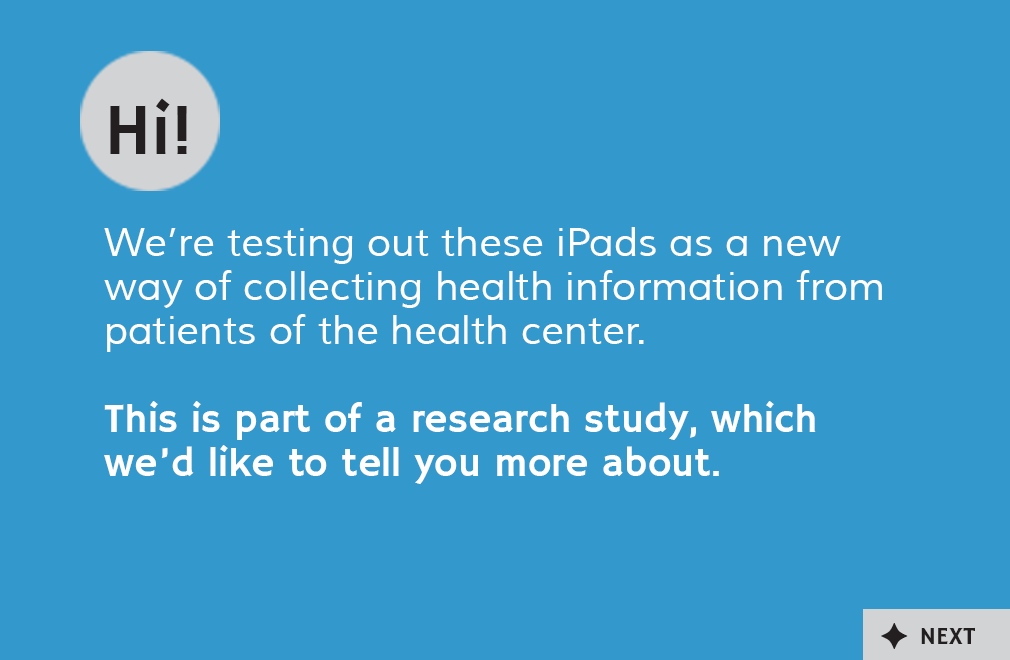
<style>
.page{position:relative;width:1010px;height:660px;background:#3398cc}
.page>*{position:absolute;margin:0}
.t1{font:72px "HammersmithOne-Regular";color:#231f20}
.t2{font:40px/44px "Muli";color:#ffffff}
.t3{font:40px/44px "HammersmithOne-Regular";color:#ffffff}
.t4{font:25px "HammersmithOne-Regular";color:#231f20}
</style>
<div class="page">
<p class="t1" style="left:110px;top:98px;width:77px;height:56px">Hi!</p>
<p class="t2" style="left:104px;top:227px;width:778px;height:257px">We’re testing out these iPads as a new <br>way of collecting health information from patients of the health center. <br><br><span class="t3">This is part of a research study, which <br>we’d like to tell you more about.</span></p>
<p class="t4" style="left:921px;top:627px;width:54px;height:17px">NEXT</p>
</div>
